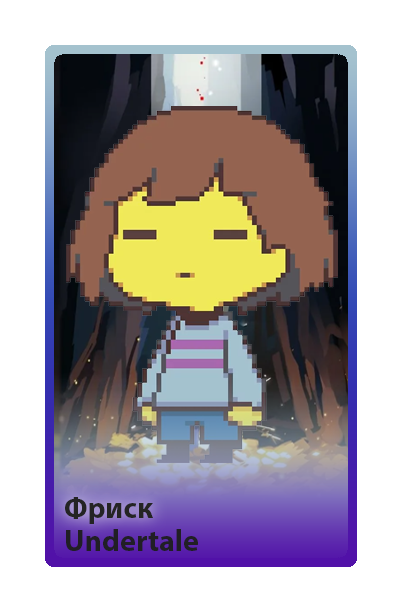
<style>
.page{position:relative;width:402px;height:603px;background:#ffffff}
.page>*{position:absolute;margin:0}
.t1{font:30px "MyriadPro-Bold";color:#242424}
.t2{font:30px "MyriadPro-Bold";color:#211f25}
</style>
<div class="page">
<p class="t1" style="left:65px;top:497px;width:88px;height:27px">Фриск</p>
<p class="t2" style="left:66px;top:529px;width:132px;height:22px">Undertale</p>
</div>
